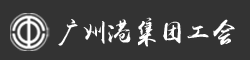
<style>
.page{position:relative;width:250px;height:60px;background:#333333}
.page>*{position:absolute;margin:0}
.t1{font:26px "yuweij";color:#ffffff}
</style>
<div class="page">
<p class="t1" style="left:58px;top:17px;width:177px;height:30px">广州港集团工会</p>
</div>
